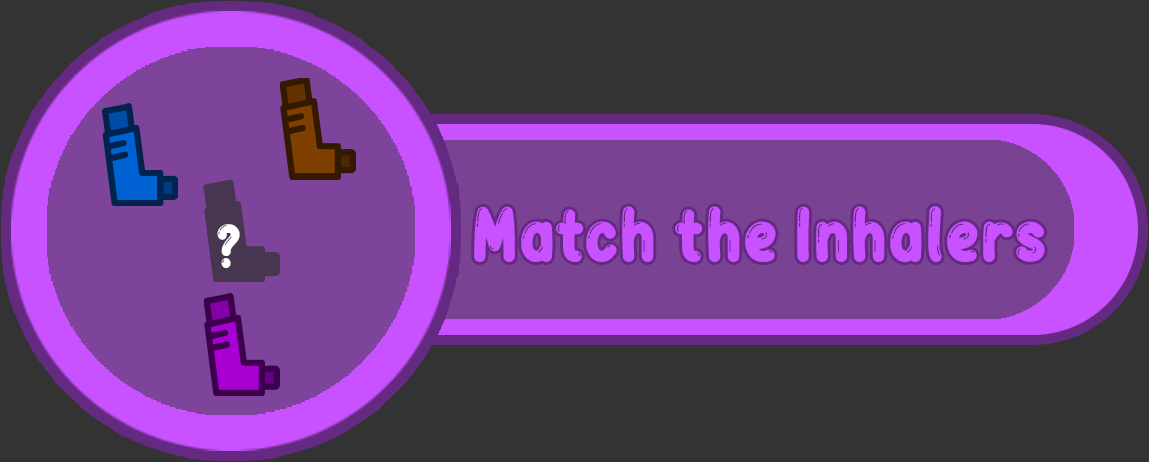
<style>
.page{position:relative;width:1149px;height:462px;background:#333333}
.page>*{position:absolute;margin:0}
.t1{font:79.2px "BubbleBobble";color:#c852ff}
.t2{font:62.5px "BubbleBobble";color:#ffffff}
</style>
<div class="page">
<p class="t1" style="left:474px;top:206px;width:571px;height:56px">Match the Inhalers</p>
<p class="t2" style="left:217px;top:224px;width:23px;height:44px">?</p>
</div>
